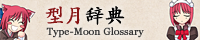
<style>
.page{position:relative;width:200px;height:40px}
.page>*{position:absolute;margin:0}
.t1{font:20px "¿¬Ìå";color:#871313;font-weight:bold}
.t2{font:20px "¿¬Ìå";color:#000000;font-weight:bold}
.t3{font:10px "Georgia";color:#333333;font-weight:bold}
</style>
<div class="page">
<p class="t1" style="left:45px;top:6px;width:80px;height:19px">型月<span class="t2">辞典</span></p>
<p class="t3" style="left:46px;top:27px;width:98px;height:11px">Type-Moon Glossary</p>
</div>
